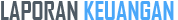
<style>
.page{position:relative;width:178px;height:20px;background:#ffffff}
.page>*{position:absolute;margin:0}
.t1{font:25px "AgencyFB-Bold";color:#49a7fa}
.t2{font:25px "AgencyFB-Bold";color:#4e5a64}
</style>
<div class="page">
<p class="t1" style="left:1px;top:1px;width:173px;height:19px"><span class="t2">LAPORAN </span>KEUANGAN</p>
</div>
